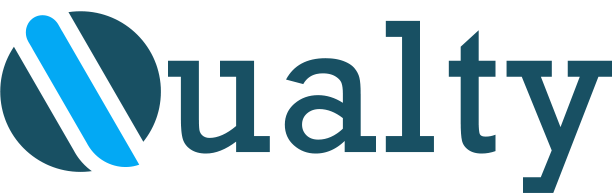
<style>
.page{position:relative;width:612px;height:193px;background:#ffffff}
.page>*{position:absolute;margin:0}
.t1{font:193.2px "Rockwell";letter-spacing:0.02em;color:#185063}
</style>
<div class="page">
<p class="t1" style="left:168px;top:20px;width:444px;height:173px">ualty</p>
</div>
